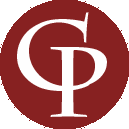
<style>
.page{position:relative;width:129px;height:129px;background:#872121}
.page>*{position:absolute;margin:0}
.t1{font:100px "CharlemagneStd-Bold";color:#fefefe}
</style>
<div class="page">
<p class="t1" style="left:17px;top:12px;width:74px;height:79px">C</p>
<p class="t1" style="left:50px;top:47px;width:57px;height:70px">p</p>
</div>
